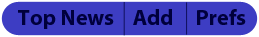
<style>
.page{position:relative;width:259px;height:37px;background:#3d3dc3}
.page>*{position:absolute;margin:0}
.t1{font:22.2px "MyriadPro-Bold";color:#00003c}
</style>
<div class="page">
<p class="t1" style="left:18px;top:10px;width:96px;height:19px">Top News</p>
<p class="t1" style="left:133px;top:9px;width:39px;height:16px">Add</p>
<p class="t1" style="left:197px;top:9px;width:49px;height:16px">Prefs</p>
</div>
